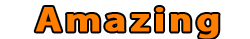
<style>
.page{position:relative;width:250px;height:39px;background:#ffffff}
.page>*{position:absolute;margin:0}
.t1{font:30.4px "AdobeGothicStd-Bold";letter-spacing:0.075em;color:#ff7e00;font-weight:bold;scale:1.29 1}
</style>
<div class="page">
<p class="t1" style="left:35px;top:7px;width:184px;height:32px">Amazing</p>
</div>
